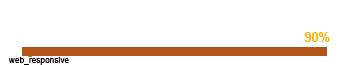
<style>
.page{position:relative;width:355px;height:65px;background:#ffffff}
.page>*{position:absolute;margin:0}
.t1{font:12.5px "Arial-BoldMT";color:#feae02}
.t2{font:8.3px "ArialMT";color:#000000}
</style>
<div class="page">
<p class="t1" style="left:304px;top:32px;width:26px;height:10px">90%</p>
<p class="t2" style="left:9px;top:57px;width:60px;height:8px">web_responsive</p>
</div>
